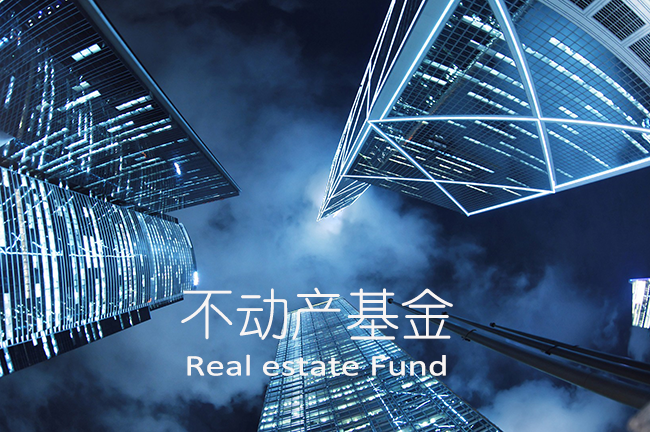
<style>
.page{position:relative;width:650px;height:432px}
.page>*{position:absolute;margin:0}
.t1{font:55px "YouYuan";color:#f8f5f4}
.t2{font:30px "Calibri";color:#f8f5f4;scale:1.3 1}
</style>
<div class="page">
<p class="t1" style="left:181px;top:287px;width:272px;height:53px">不动产基金</p>
<p class="t2" style="left:187px;top:354px;width:259px;height:22px">Real estate Fund</p>
</div>
